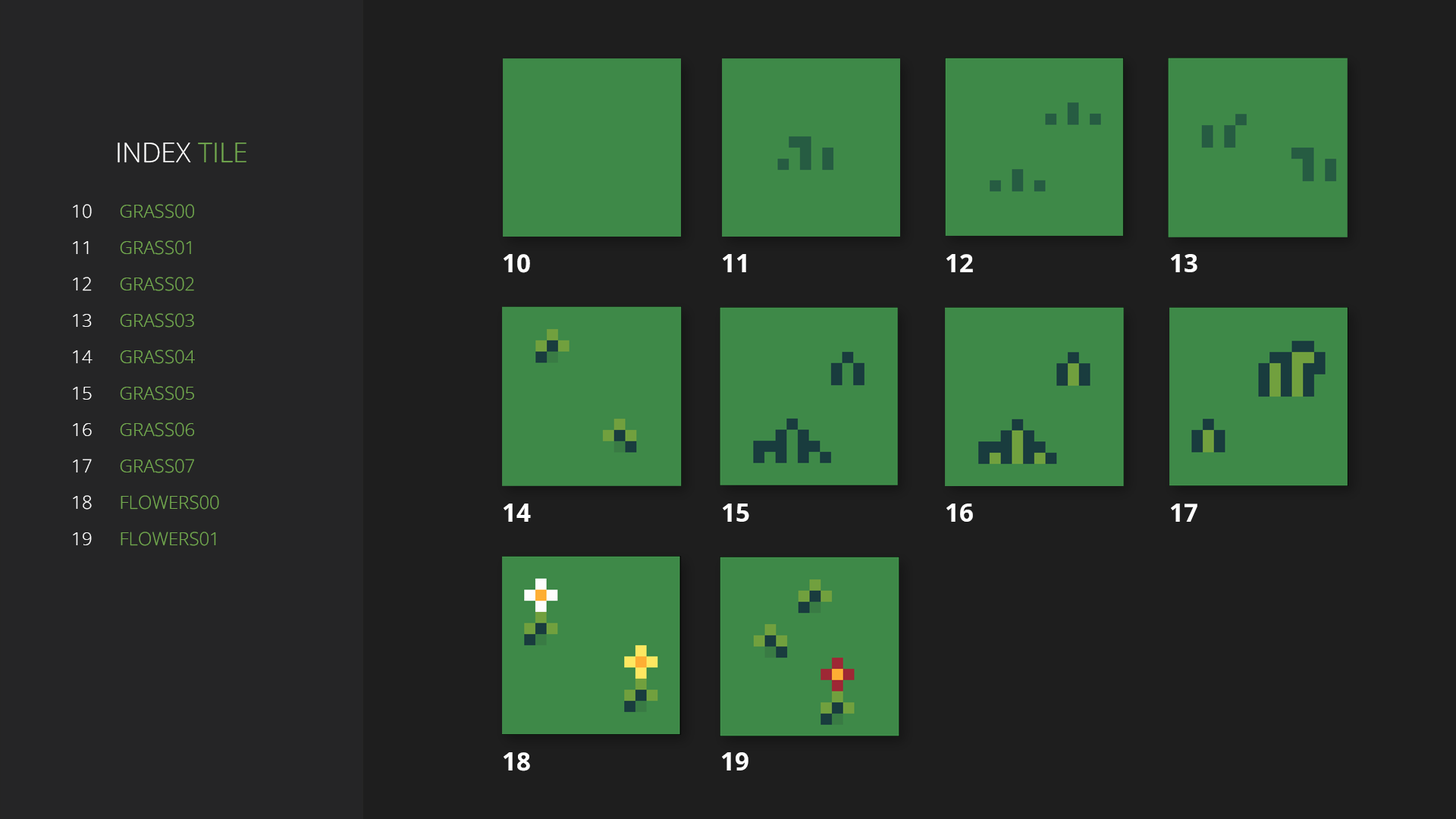
<style>
.page{position:relative;width:1456px;height:819px;background:#1e1e1e}
.page>*{position:absolute;margin:0}
.t1{font:27.3px "OpenSans-Light";color:#ffffff;text-transform:uppercase}
.t2{font:27.3px "OpenSans-Light";color:#73aa4f;text-transform:uppercase}
.t3{font:18.2px/36.4px "OpenSans-Light";color:#ffffff;text-transform:uppercase}
.t4{font:18.2px/36.4px "OpenSans-Light";color:#73aa4f;text-transform:uppercase}
.t5{font:25.1px "OpenSans-Bold";color:#ffffff;text-transform:uppercase}
</style>
<div class="page">
<p class="t1" style="left:118px;top:143px;width:128px;height:20px">index<span class="t2"> tile</span></p>
<p class="t3" style="left:73px;top:204px;width:20px;height:341px;text-align:center">10<br>11<br>12<br>13<br>14<br>15<br>16<br>17<br>18<br>19</p>
<p class="t4" style="left:120px;top:204px;width:99px;height:342px">grass00<br>grass01<br>grass02<br>grass03<br>grass04<br>grass05<br>grass06<br>grass07<br>flowers00<br>flowers01</p>
<p class="t5" style="left:504px;top:254px;width:26px;height:19px">10</p>
<p class="t5" style="left:723px;top:254px;width:23px;height:18px">11</p>
<p class="t5" style="left:946px;top:254px;width:27px;height:18px">12</p>
<p class="t5" style="left:1171px;top:254px;width:26px;height:18px">13</p>
<p class="t5" style="left:504px;top:504px;width:27px;height:18px">14</p>
<p class="t5" style="left:723px;top:504px;width:26px;height:18px">15</p>
<p class="t5" style="left:946px;top:504px;width:27px;height:18px">16</p>
<p class="t5" style="left:1171px;top:504px;width:26px;height:18px">17</p>
<p class="t5" style="left:504px;top:752px;width:26px;height:19px">18</p>
<p class="t5" style="left:722px;top:752px;width:26px;height:18px">19</p>
</div>
